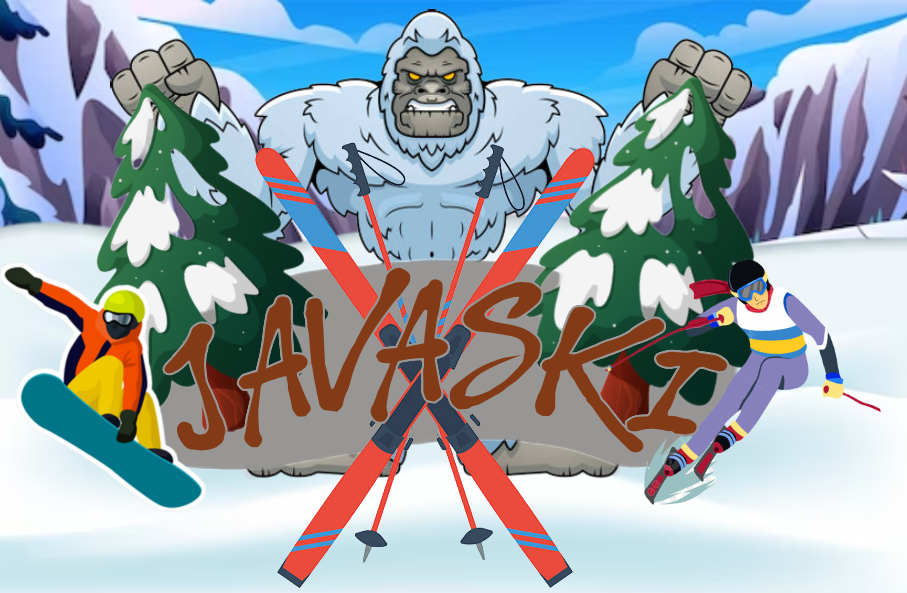
<style>
.page{position:relative;width:907px;height:593px}
.page>*{position:absolute;margin:0}
.t1{font:150px "MonsterGame";color:#833b17}
</style>
<div class="page">
<p class="t1" style="left:162px;top:265px;width:568px;height:190px;rotate:-6deg">JAVASKI</p>
</div>
